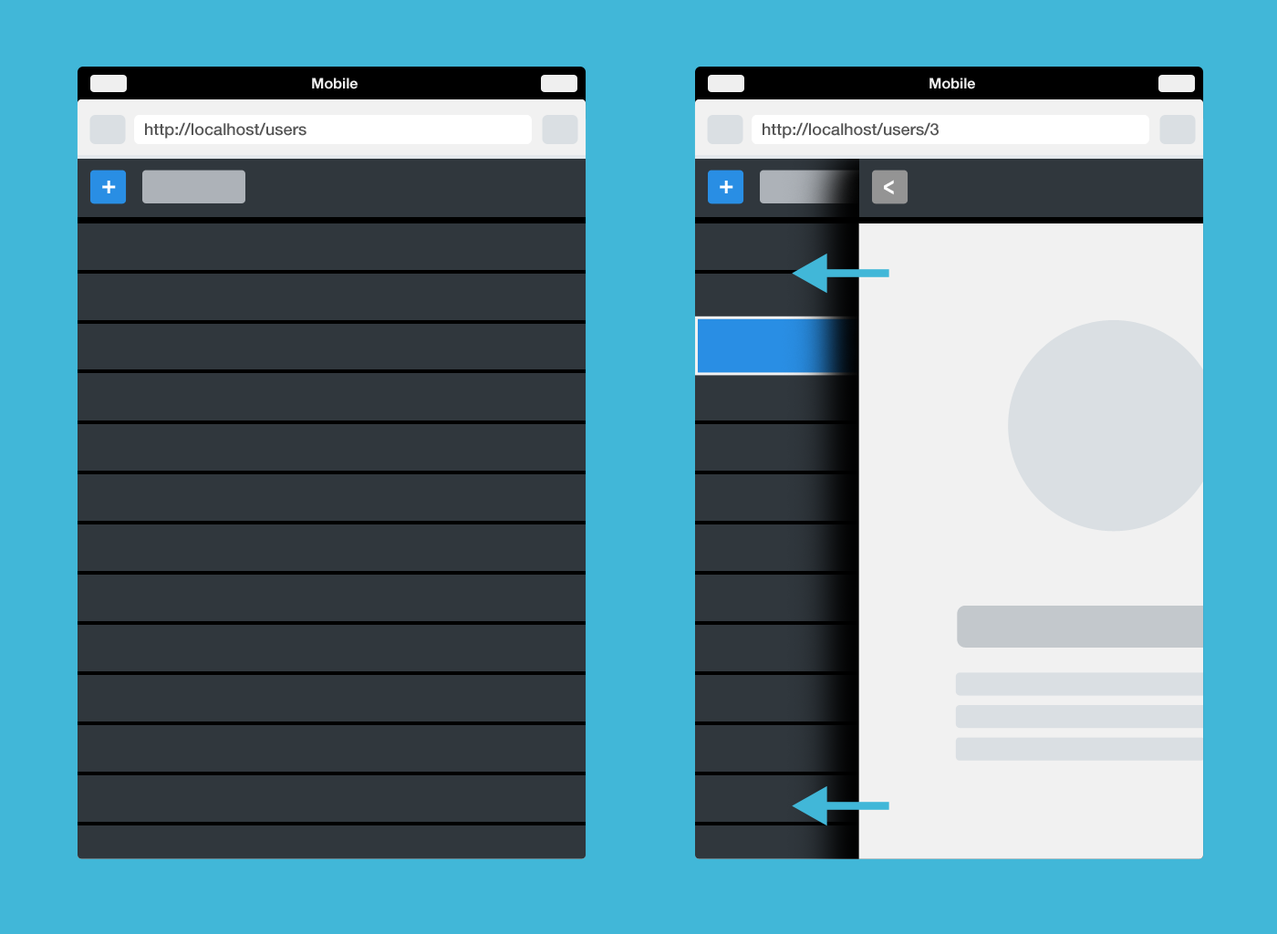
<style>
.page{position:relative;width:1277px;height:934px;background:#41b7d8}
.page>*{position:absolute;margin:0}
.t1{font:14.6px "HelveticaNeue-Bold";color:#efefef}
.t2{font:16.4px "HelveticaNeue-Medium";color:#555555}
.t3{font:25.2px "HelveticaNeue-Bold";color:#ffffff}
.t4{font:27.3px "HelveticaNeue-Bold";color:#ffffff;scale:0.71 1}
</style>
<div class="page">
<p class="t1" style="left:312px;top:78px;width:46px;height:11px">Mobile</p>
<p class="t1" style="left:929px;top:78px;width:46px;height:11px">Mobile</p>
<p class="t2" style="left:145px;top:122px;width:161px;height:17px">http://localhost/users</p>
<p class="t2" style="left:762px;top:122px;width:176px;height:17px">http://localhost/users/3</p>
<p class="t3" style="left:102px;top:181px;width:14px;height:12px">+</p>
<p class="t3" style="left:720px;top:181px;width:13px;height:12px">+</p>
<p class="t4" style="left:884px;top:180px;width:10px;height:15px">&lt;</p>
</div>
